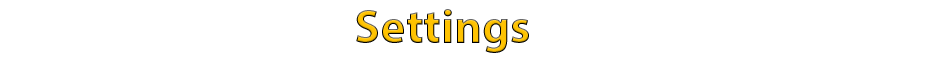
<style>
.page{position:relative;width:935px;height:64px;background:#ffffff}
.page>*{position:absolute;margin:0}
.t1{font:48px "MyriadPro-Bold"}
</style>
<div class="page">
<p class="t1" style="left:356px;top:9px;width:173px;height:44px">Settings</p>
</div>
